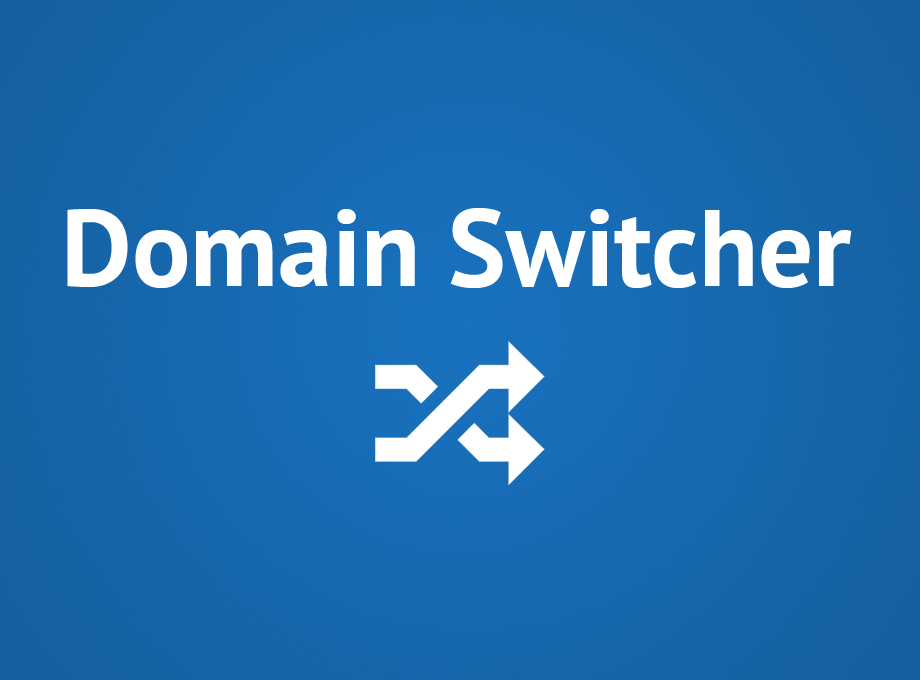
<style>
.page{position:relative;width:920px;height:680px}
.page>*{position:absolute;margin:0}
.t1{font:109px "PTSans-Bold";color:#ffffff}
</style>
<div class="page">
<p class="t1" style="left:67px;top:208px;width:785px;height:80px">Domain Switcher</p>
</div>
